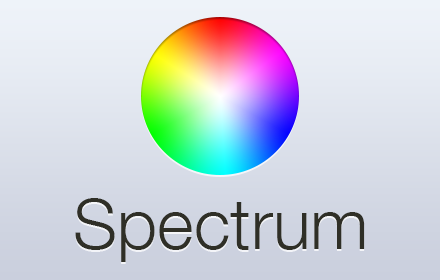
<style>
.page{position:relative;width:440px;height:280px}
.page>*{position:absolute;margin:0}
.t1{font:70px "HelveticaNeue-Light";color:#2f2f27}
</style>
<div class="page">
<p class="t1" style="left:75px;top:198px;width:290px;height:64px">Spectrum</p>
</div>
